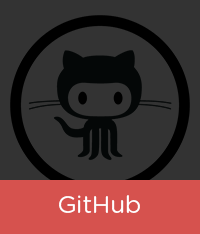
<style>
.page{position:relative;width:200px;height:234px;background:#333333}
.page>*{position:absolute;margin:0}
.t1{font:24px "GothamRounded-Book";color:#ffffff}
</style>
<div class="page">
<p class="t1" style="left:59px;top:195px;width:81px;height:18px">GitHub</p>
</div>
